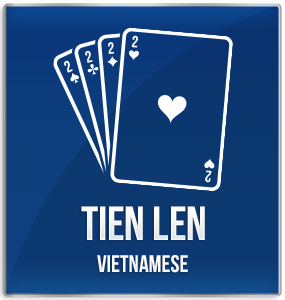
<style>
.page{position:relative;width:285px;height:300px}
.page>*{position:absolute;margin:0}
.t1{font:48px "BebasNeueBold";color:#ffffff;text-transform:uppercase}
.t2{font:24px "BebasNeueBold";color:#ffffff}
</style>
<div class="page">
<p class="t1" style="left:81px;top:206px;width:124px;height:34px">tien len</p>
<p class="t2" style="left:97px;top:255px;width:91px;height:18px">Vietnamese</p>
</div>
